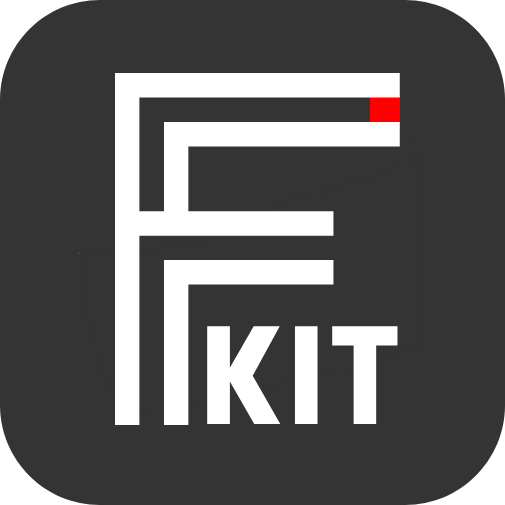
<style>
.page{position:relative;width:505px;height:505px;background:#343434}
.page>*{position:absolute;margin:0}
.t1{font:480px "Zambajoun";color:#ffffff}
.t2{font:140px "Versa-Versa";color:#ffffff}
</style>
<div class="page">
<p class="t1" style="left:115px;top:72px;width:285px;height:353px">F</p>
<p class="t2" style="left:207px;top:326px;width:191px;height:98px">Kit</p>
</div>
